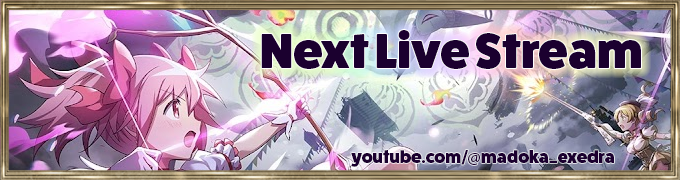
<style>
.page{position:relative;width:680px;height:180px}
.page>*{position:absolute;margin:0}
.t1{font:49.9px "FatFrank-Heavy";color:#1b002f}
.t2{font:17.5px "FatFrank-Heavy";color:#1b002f}
.t3{font:17.5px "MyriadPro-Regular";color:#1b002f}
</style>
<div class="page">
<p class="t1" style="left:261px;top:30px;width:380px;height:39px">Next Live Stream</p>
<p class="t2" style="left:351px;top:150px;width:263px;height:17px">youtube.com/<span class="t3">@</span>madoka_exedra</p>
</div>
